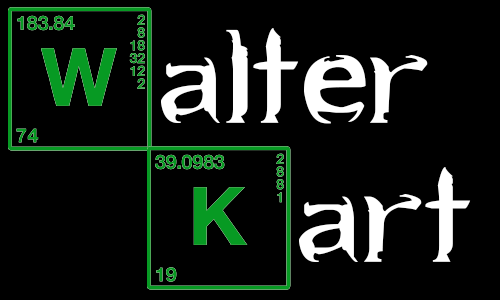
<style>
.page{position:relative;width:500px;height:300px;background:#000000}
.page>*{position:absolute;margin:0}
.t1{font:191.7px "HeartBreakingBad";color:#ffffff}
.t2{font:191.7px "HeartBreakingBad";color:#079a23}
.t3{font:191.7px "HeartBreakingBad"}
</style>
<div class="page">
<p class="t1" style="left:8px;top:7px;width:420px;height:144px">Walter</p>
<p class="t2" style="left:8px;top:7px;width:144px;height:144px">W</p>
<p class="t3" style="left:147px;top:146px;width:324px;height:144px">Kart</p>
<p class="t2" style="left:147px;top:146px;width:144px;height:144px">K</p>
</div>
